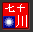
<style>
.page{position:relative;width:33px;height:32px;background:#f20000}
.page>*{position:absolute;margin:0}
.t1{font:10.4px "SimSun";color:#ffffff}
.t2{font:11.7px "SimSun";color:#ffffff}
</style>
<div class="page">
<p class="t1" style="left:5px;top:4px;width:20px;height:8px">七十</p>
<p class="t2" style="left:16px;top:15px;width:11px;height:12px">川</p>
</div>
